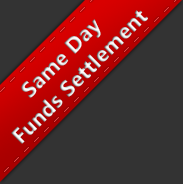
<style>
.page{position:relative;width:183px;height:184px;background:#333333}
.page>*{position:absolute;margin:0}
.t1{font:22px "MicrosoftTaiLe-Bold"}
</style>
<div class="page">
<p class="t1" style="left:11px;top:10px;width:137px;height:134px;text-align:center;rotate:-45deg">Same Day<br>Funds Settlement</p>
</div>
